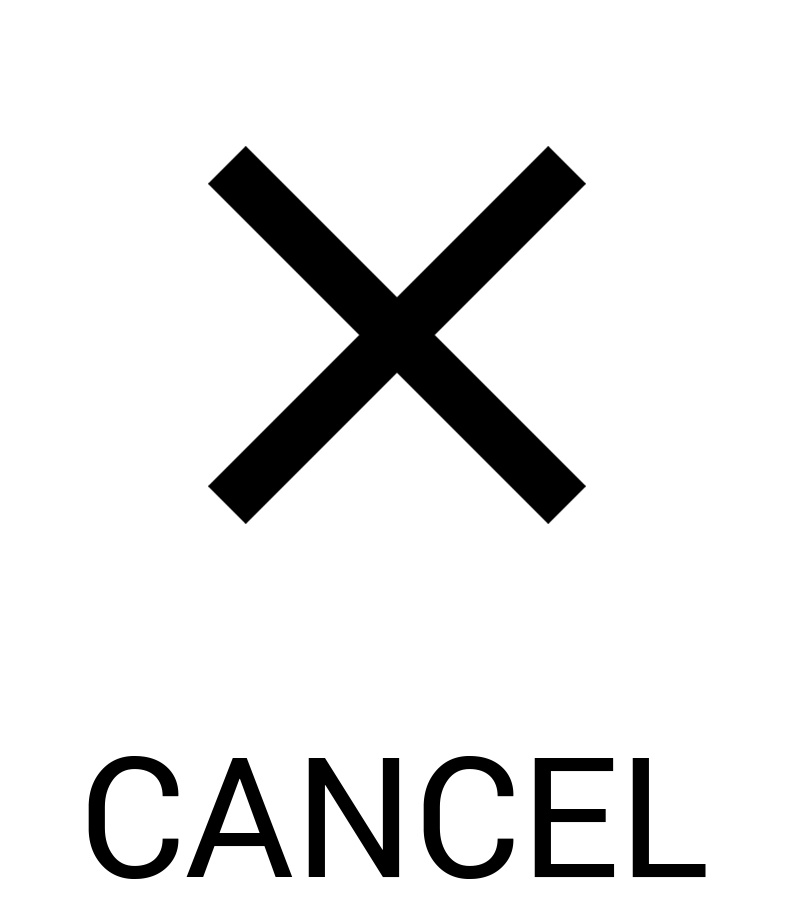
<style>
.page{position:relative;width:800px;height:900px;background:#ffffff}
.page>*{position:absolute;margin:0}
.t1{font:168px "Roboto-Regular";color:#000000}
</style>
<div class="page">
<p class="t1" style="left:88px;top:756px;width:618px;height:123px">CANCEL</p>
</div>
